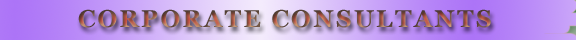
<style>
.page{position:relative;width:576px;height:40px}
.page>*{position:absolute;margin:0}
.t1{font:24px "Georgia-Bold";letter-spacing:0.1em}
</style>
<div class="page">
<p class="t1" style="left:78px;top:9px;width:413px;height:19px">CORPORATE CONSULTANTS</p>
</div>
